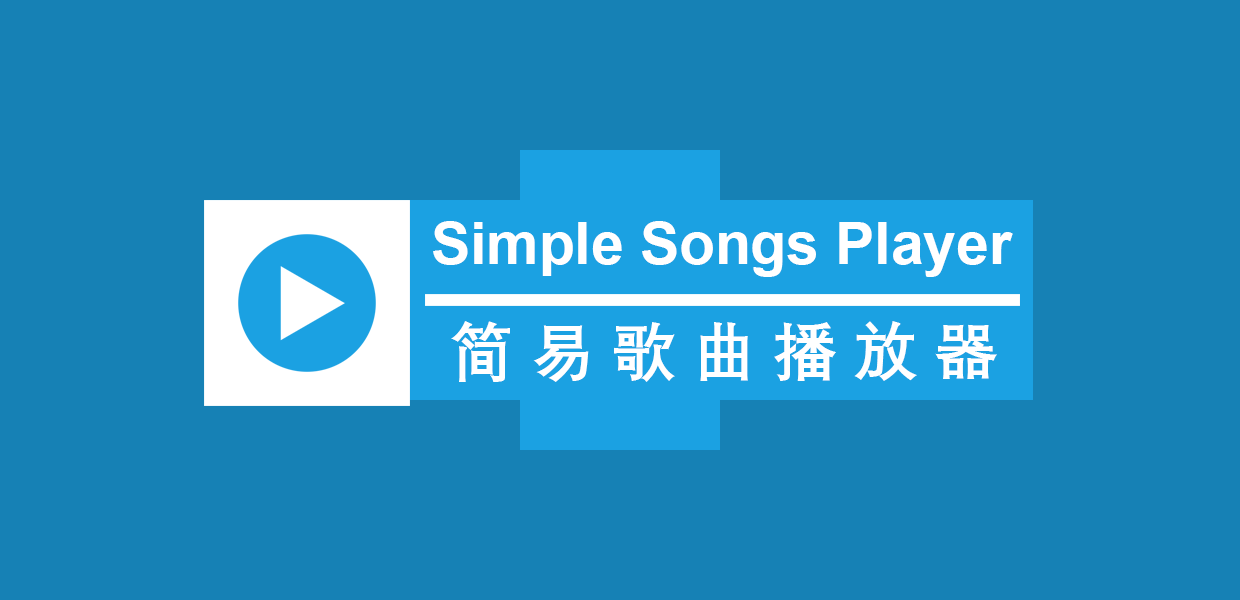
<style>
.page{position:relative;width:1240px;height:600px;background:#1681b5}
.page>*{position:absolute;margin:0}
.t1{font:58.7px "Arial-BoldMT";color:#ffffff}
.t2{font:64px "DengXian-Bold";letter-spacing:0.26em;color:#ffffff}
</style>
<div class="page">
<p class="t1" style="left:433px;top:221px;width:580px;height:56px">Simple Songs Player</p>
<p class="t2" style="left:451px;top:321px;width:546px;height:61px">简易歌曲播放器</p>
</div>
